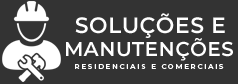
<style>
.page{position:relative;width:238px;height:84px;background:#333333}
.page>*{position:absolute;margin:0}
.t1{font:22px "Montserrat-SemiBold";letter-spacing:0.025em;color:#ffffff}
.t2{font:20px "Montserrat-SemiBold";letter-spacing:0.025em;color:#ffffff}
.t3{font:7px "Montserrat-SemiBold";letter-spacing:0.25em;color:#ffffff}
</style>
<div class="page">
<p class="t1" style="left:75px;top:13px;width:150px;height:25px">SOLUÇÕES E</p>
<p class="t2" style="left:66px;top:38px;width:167px;height:23px">MANUTENÇÕES</p>
<p class="t3" style="left:75px;top:64px;width:149px;height:5px">RESIDENCIAIS E COMERCIAIS</p>
</div>
